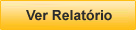
<style>
.page{position:relative;width:136px;height:30px}
.page>*{position:absolute;margin:0}
.t1{font:14px "Arial-BoldMT";color:#2c2c2c}
</style>
<div class="page">
<p class="t1" style="left:26px;top:9px;width:86px;height:12px">Ver Relatório</p>
</div>
